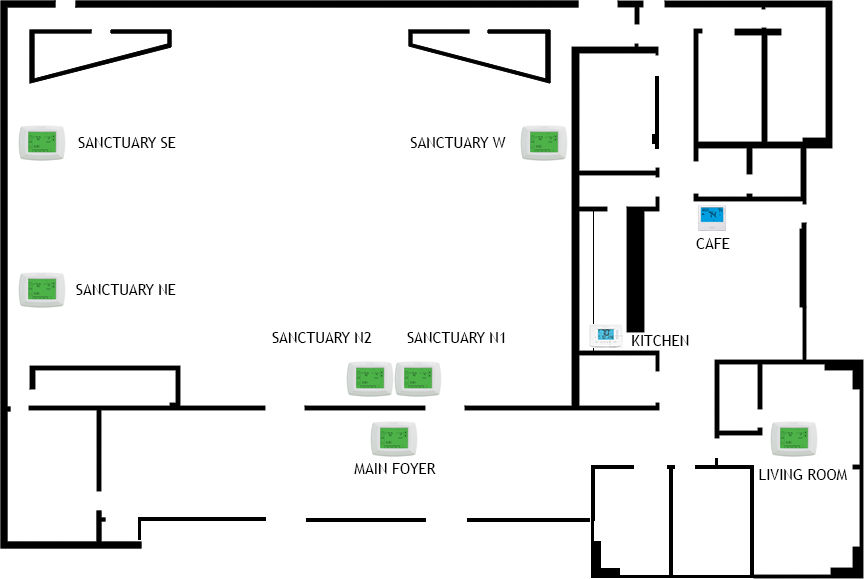
<style>
.page{position:relative;width:864px;height:579px;background:#ffffff}
.page>*{position:absolute;margin:0}
.t1{font:15px "TrebuchetMS";color:#000000}
</style>
<div class="page">
<p class="t1" style="left:78px;top:137px;width:98px;height:11px">SANCTUARY SE</p>
<p class="t1" style="left:410px;top:137px;width:96px;height:11px">SANCTUARY W</p>
<p class="t1" style="left:696px;top:238px;width:34px;height:11px">CAFE</p>
<p class="t1" style="left:76px;top:284px;width:100px;height:11px">SANCTUARY NE</p>
<p class="t1" style="left:272px;top:332px;width:100px;height:11px">SANCTUARY N2</p>
<p class="t1" style="left:407px;top:332px;width:98px;height:11px">SANCTUARY N1</p>
<p class="t1" style="left:632px;top:335px;width:57px;height:11px">KITCHEN</p>
<p class="t1" style="left:354px;top:463px;width:82px;height:11px">MAIN FOYER</p>
<p class="t1" style="left:759px;top:469px;width:88px;height:11px">LIVING ROOM</p>
</div>
